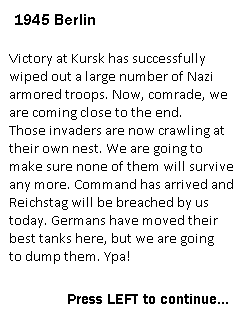
<style>
.page{position:relative;width:240px;height:320px;background:#ffffff}
.page>*{position:absolute;margin:0}
.t1{font:16px "FranklinGothic-Demi";color:#000000}
.t2{font:15px "Calibri";color:#000000}
.t3{font:15px "FranklinGothic-Demi";color:#000000}
</style>
<div class="page">
<p class="t1" style="left:15px;top:14px;width:80px;height:11px">1945 Berlin</p>
<p class="t2" style="left:9px;top:53px;width:224px;height:211px">Victory at Kursk has successfully<br>wiped out a large number of Nazi<br>armored troops. Now, comrade, we<br>are coming close to the end.<br>Those invaders are now crawling at<br>their own nest. We are going to <br>make sure none of them will survive<br>any more. Command has arrived and<br>Reichstag will be breached by us <br>today. Germans have moved their<br>best tanks here, but we are going<br>to dump them. Ypa!</p>
<p class="t3" style="left:68px;top:294px;width:160px;height:10px">Press LEFT to continue...</p>
</div>
